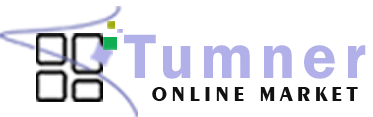
<style>
.page{position:relative;width:373px;height:117px;background:#ffffff}
.page>*{position:absolute;margin:0}
.t1{font:64.9px "FranklinGothic-Demi";letter-spacing:0.1em;color:#b2b0e8}
.t2{font:20.8px "Exotic350BT-Bold";letter-spacing:0.2em;color:#111111}
</style>
<div class="page">
<p class="t1" style="left:124px;top:34px;width:242px;height:45px">Tumner</p>
<p class="t2" style="left:152px;top:87px;width:206px;height:14px">ONLINE MARKET</p>
</div>
